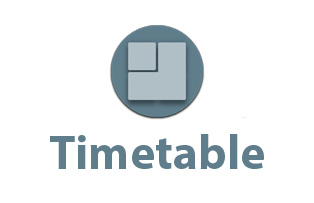
<style>
.page{position:relative;width:314px;height:203px;background:#ffffff}
.page>*{position:absolute;margin:0}
.t1{font:48px "MyriadPro-Bold";color:#607d8b}
</style>
<div class="page">
<p class="t1" style="left:50px;top:134px;width:214px;height:35px">Timetable</p>
</div>
